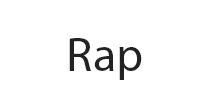
<style>
.page{position:relative;width:210px;height:110px;background:#ffffff}
.page>*{position:absolute;margin:0}
.t1{font:47.8px "MyriadPro-Regular";color:#222222}
</style>
<div class="page">
<p class="t1" style="left:69px;top:38px;width:73px;height:42px">Rap</p>
</div>
